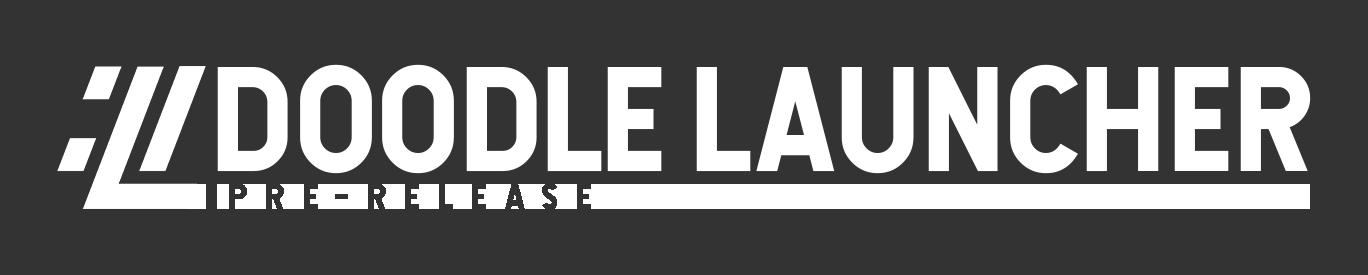
<style>
.page{position:relative;width:1368px;height:275px;background:#333333}
.page>*{position:absolute;margin:0}
.t1{font:142px "Hansief";color:#ffffff}
</style>
<div class="page">
<p class="t1" style="left:217px;top:64px;width:1094px;height:110px">DOODLE LAUNCHER</p>
</div>
